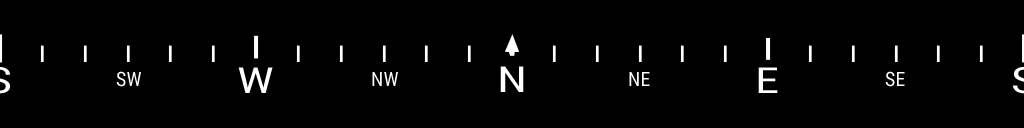
<style>
.page{position:relative;width:1024px;height:128px;background:#000000}
.page>*{position:absolute;margin:0}
.t1{font:19.7px "RobotoCondensed-Regular";letter-spacing:0.01em;color:#ffffff}
.t2{font:36.1px "RobotoCondensed-Regular";letter-spacing:0.01em;color:#ffffff;scale:1.34 1}
</style>
<div class="page">
<p class="t1" style="left:116px;top:71px;width:25px;height:16px">SW</p>
<p class="t2" style="left:238px;top:67px;width:35px;height:26px">W</p>
<p class="t1" style="left:372px;top:72px;width:26px;height:14px">NW</p>
<p class="t2" style="left:500px;top:66px;width:24px;height:26px">N</p>
<p class="t1" style="left:629px;top:72px;width:21px;height:14px">NE</p>
<p class="t2" style="left:758px;top:67px;width:20px;height:26px">E</p>
<p class="t1" style="left:885px;top:71px;width:20px;height:16px">SE</p>
</div>
